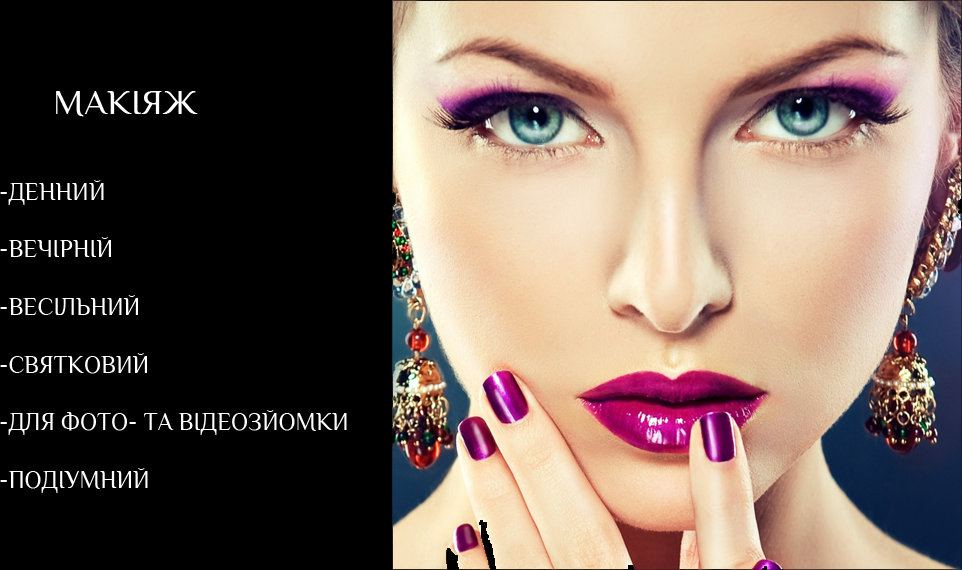
<style>
.page{position:relative;width:962px;height:570px;background:#000000}
.page>*{position:absolute;margin:0}
.t1{font:36px "Philosopher-Regular";color:#ffffff}
.t2{font:24px "Philosopher-Regular";color:#ffffff}
</style>
<div class="page">
<p class="t1" style="left:56px;top:91px;width:142px;height:26px">МАКІЯЖ</p>
<p class="t2" style="left:0px;top:180px;width:347px;height:313px">-ДЕННИЙ<br><br>-ВЕЧІРНІЙ<br><br>-ВЕСІЛЬНИЙ<br><br>-СВЯТКОВИЙ<br><br>-ДЛЯ ФОТО- ТА ВІДЕОЗЙОМКИ<br><br>-ПОДІУМНИЙ<br>-</p>
</div>
